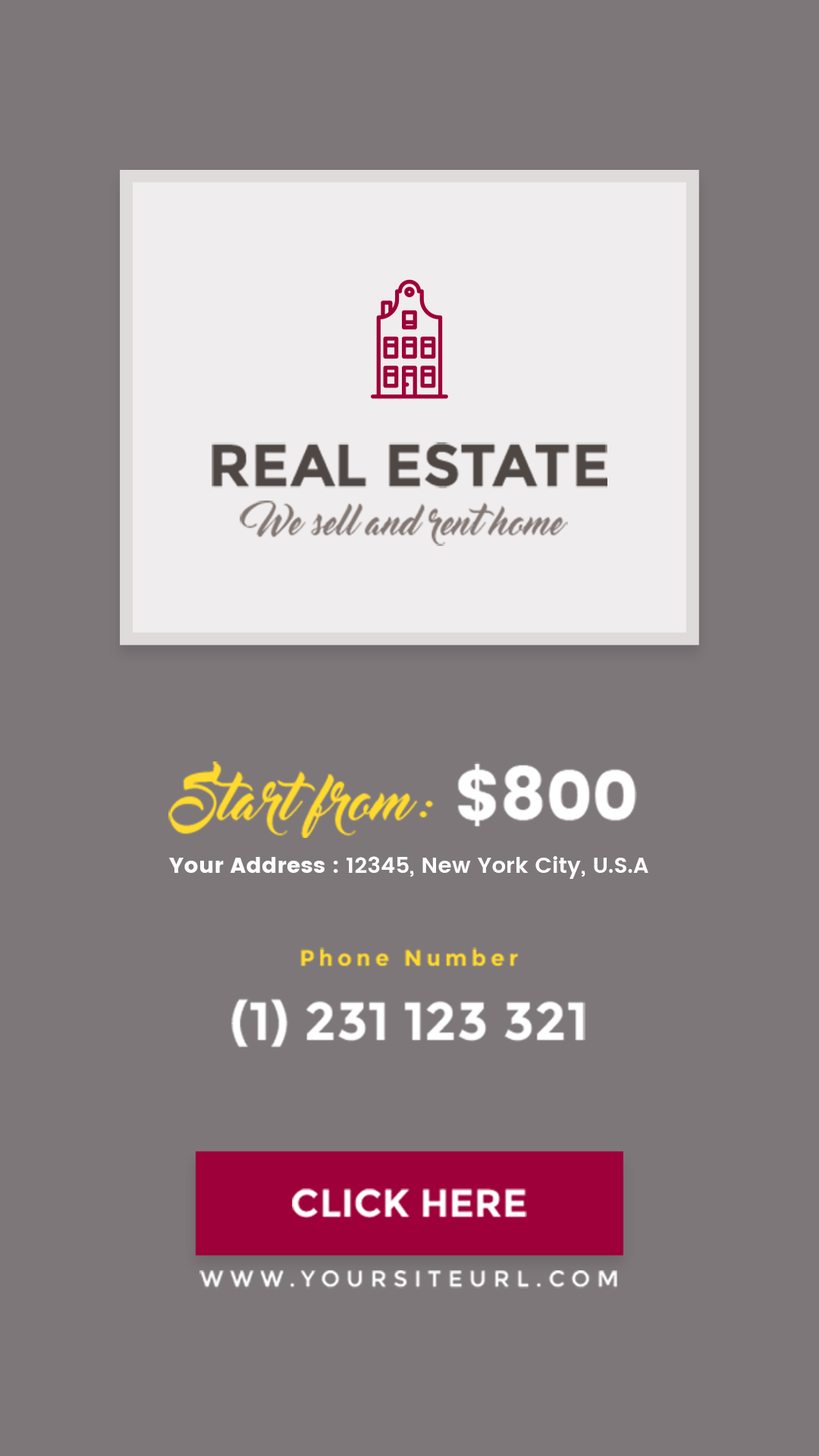
<style>
.page{position:relative;width:819px;height:1456px;background:#7e7779}
.page>*{position:absolute;margin:0}
.t1{font:59.4px "Montserrat-Bold";color:#4f4744;text-transform:uppercase}
.t2{font:35.6px "MasterOfBreak";color:#837773}
.t3{font:53.5px "MasterOfBreak";color:#ffda2e}
.t4{font:71.3px "Poppins";color:#ffffff}
.t5{font:22.3px "Poppins-SemiBold";color:#ffffff}
.t6{font:22.3px "Poppins";color:#ffffff}
.t7{font:53.5px/74.2px "Montserrat-Bold";color:#ffffff}
.t8{font:22.3px/74.2px "Montserrat-Bold";letter-spacing:0.2em;color:#ffda2e}
.t9{font:38.6px "Montserrat-Bold";color:#ffffff;text-transform:uppercase}
.t10{font:22.3px "Montserrat-Regular";letter-spacing:0.3em;color:#ffffff;text-transform:uppercase}
</style>
<div class="page">
<p class="t1" style="left:212px;top:442px;width:395px;height:46px">REal estate</p>
<p class="t2" style="left:240px;top:500px;width:328px;height:46px">We sell and rent home</p>
<p class="t3" style="left:168px;top:761px;width:469px;height:77px">Start from : <span class="t4">$800</span></p>
<p class="t5" style="left:168px;top:856px;width:480px;height:23px"><span class="t6">Your Address :</span> 12345, New York City, U.S.A</p>
<p class="t7" style="left:231px;top:947px;width:354px;height:100px;text-align:center"><span class="t8">Phone Number<br></span>(1) 231 123 321</p>
<p class="t9" style="left:292px;top:1188px;width:235px;height:30px">click here</p>
<p class="t10" style="left:199px;top:1270px;width:418px;height:18px">www.yoursiteurl.com</p>
</div>
